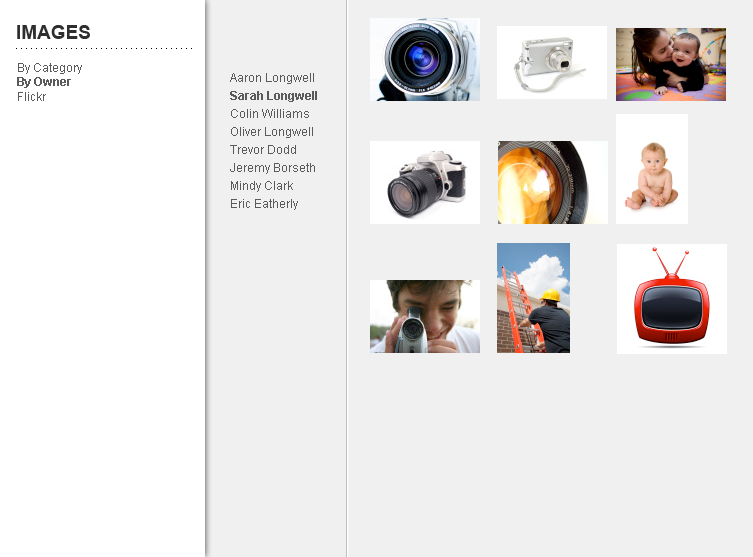
<style>
.page{position:relative;width:753px;height:557px;background:#f0f0f0}
.page>*{position:absolute;margin:0}
.t1{font:19px "Arial-BoldMT";color:#2e2e2e}
.t2{font:12px "ArialMT";color:#5a5a5a}
.t3{font:12px "Arial-BoldMT";color:#5a5a5a}
.t4{font:12px/18px "ArialMT";color:#5a5a5a}
.t5{font:12px/18px "Arial-BoldMT";color:#5a5a5a}
</style>
<div class="page">
<p class="t1" style="left:17px;top:25px;width:73px;height:14px">IMAGES</p>
<p class="t2" style="left:17px;top:63px;width:65px;height:38px">By Category<br><span class="t3">By Owner<br></span>Flickr</p>
<p class="t4" style="left:230px;top:73px;width:87px;height:137px">Aaron Longwell<br><span class="t5">Sarah Longwell<br></span>Colin Williams<br>Oliver Longwell<br>Trevor Dodd<br>Jeremy Borseth<br>Mindy Clark<br>Eric Eatherly</p>
</div>
